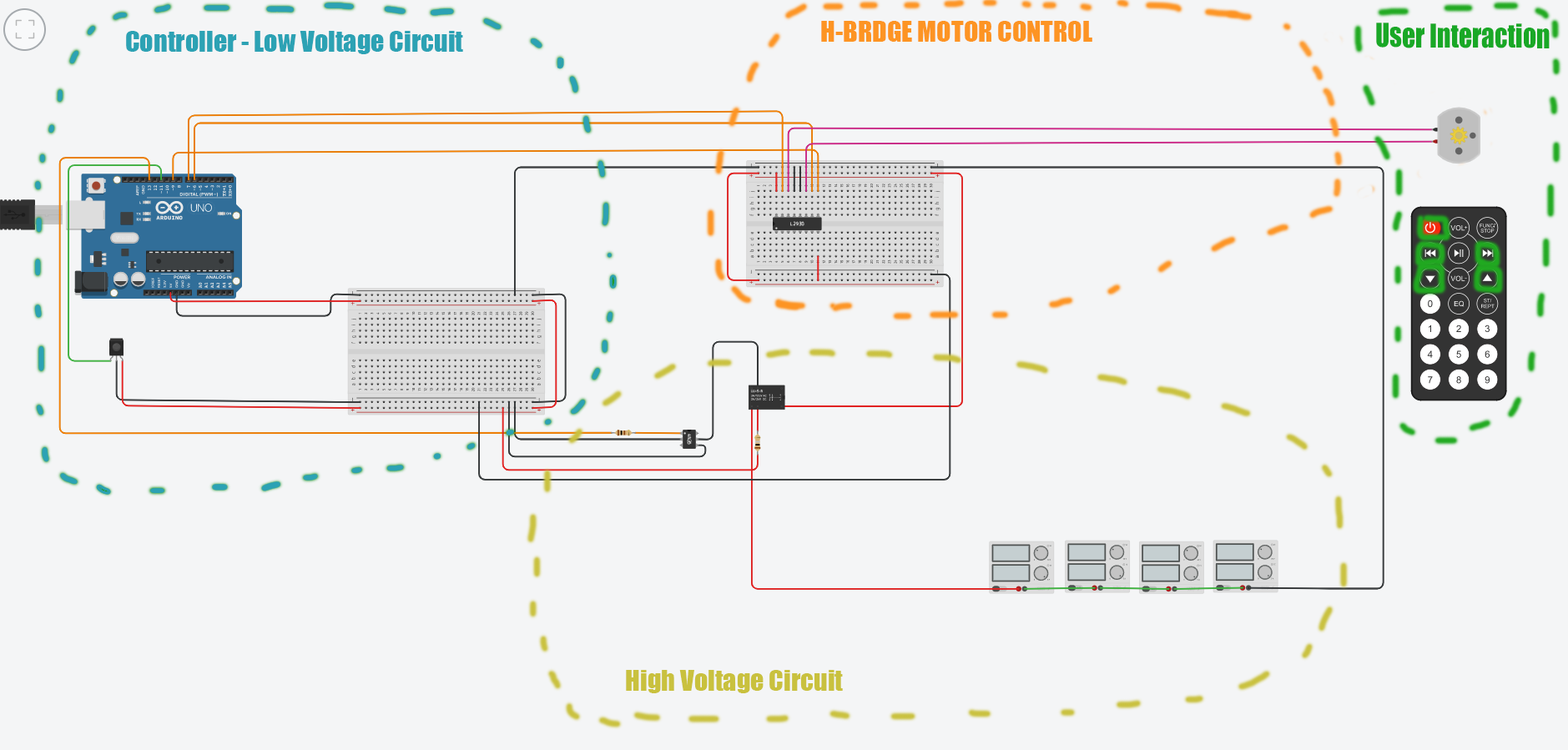
<style>
.page{position:relative;width:1568px;height:750px;background:#f4f5f6}
.page>*{position:absolute;margin:0}
.t1{font:26.7px "Impact";color:#fd9423}
.t2{font:30.5px "Impact";color:#19a826;scale:0.86 1}
.t3{font:26.7px "Impact";color:#2ca2b4}
.t4{font:26.7px "Impact";color:#c9c13e}
</style>
<div class="page">
<p class="t1" style="left:821px;top:21px;width:271px;height:21px">H-BRDGE MOTOR CONTROL</p>
<p class="t2" style="left:1376px;top:23px;width:174px;height:25px">User Interaction</p>
<p class="t3" style="left:126px;top:31px;width:337px;height:23px">Controller - Low Voltage Circuit</p>
<p class="t4" style="left:626px;top:670px;width:217px;height:23px">High Voltage Circuit</p>
</div>
